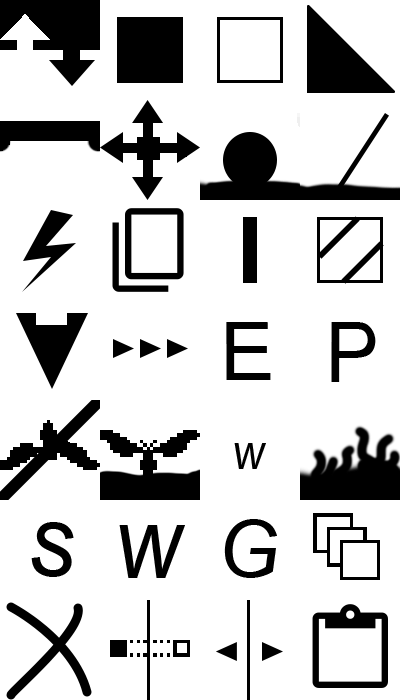
<style>
.page{position:relative;width:400px;height:700px;background:#ffffff}
.page>*{position:absolute;margin:0}
.t1{font:83.1px "Arial-ItalicMT";color:#000000;scale:0.96 1}
.t2{font:85.8px "Arial-ItalicMT";color:#000000;scale:0.93 1}
.t3{font:48px "Arial-ItalicMT";color:#000000;scale:0.93 1}
.t4{font:79.2px "Arial-ItalicMT";color:#000000}
.t5{font:101.2px "Arial-ItalicMT";color:#000000;scale:0.93 1}
</style>
<div class="page">
<p class="t1" style="left:226px;top:322px;width:45px;height:58px">E</p>
<p class="t2" style="left:331px;top:322px;width:45px;height:60px">P</p>
<p class="t3" style="left:234px;top:443px;width:32px;height:26px">w</p>
<p class="t4" style="left:224px;top:519px;width:53px;height:59px">G</p>
<p class="t5" style="left:31px;top:522px;width:43px;height:55px">s</p>
<p class="t5" style="left:119px;top:525px;width:66px;height:53px">w</p>
</div>
